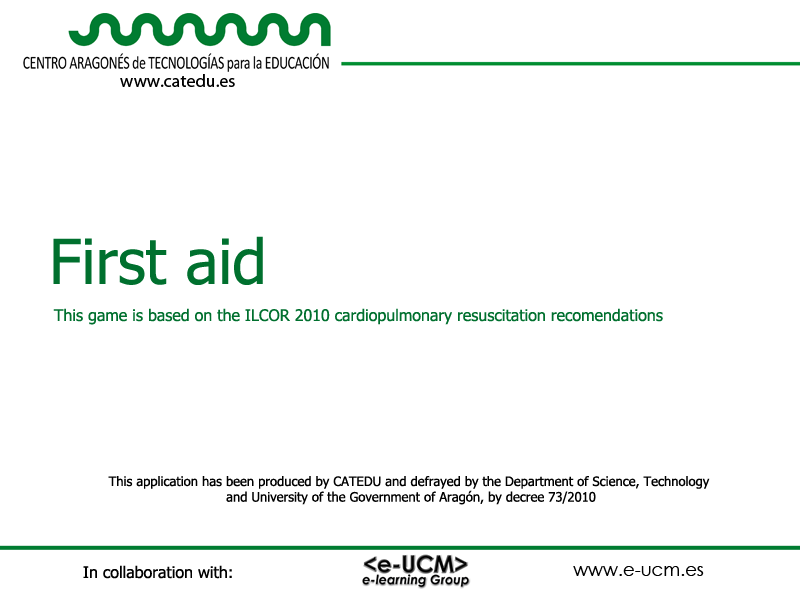
<style>
.page{position:relative;width:800px;height:600px;background:#ffffff}
.page>*{position:absolute;margin:0}
.t1{font:62px "Tahoma";color:#00702e}
.t2{font:16px "Tahoma";color:#00702e}
.t3{font:13px "Tahoma";color:#000000}
.t4{font:16px "Tahoma";color:#000000}
</style>
<div class="page">
<p class="t1" style="left:53px;top:236px;width:210px;height:49px">First aid</p>
<p class="t2" style="left:53px;top:308px;width:610px;height:17px">This game is based on the ILCOR 2010 cardiopulmonary resuscitation recomendations</p>
<p class="t3" style="left:108px;top:476px;width:602px;height:29px;text-align:center">This application has been produced by CATEDU and defrayed by the Department of Science, Technology <br>and University of the Government of Aragón, by decree 73/2010</p>
<p class="t4" style="left:83px;top:565px;width:149px;height:14px">In collaboration with:</p>
</div>
